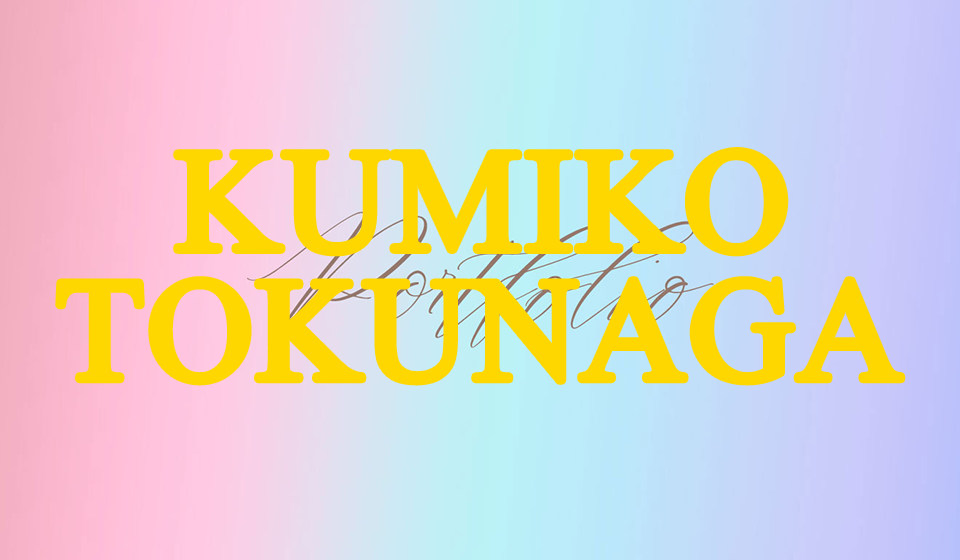
<style>
.page{position:relative;width:960px;height:560px}
.page>*{position:absolute;margin:0}
.t1{font:145.8px "TimesNewRomanPSMT";letter-spacing:0.02em;color:#ffd700}
</style>
<div class="page">
<p class="t1" style="left:177px;top:151px;width:608px;height:102px">KUMIKO</p>
<p class="t1" style="left:59px;top:280px;width:843px;height:102px">TOKUNAGA</p>
</div>
